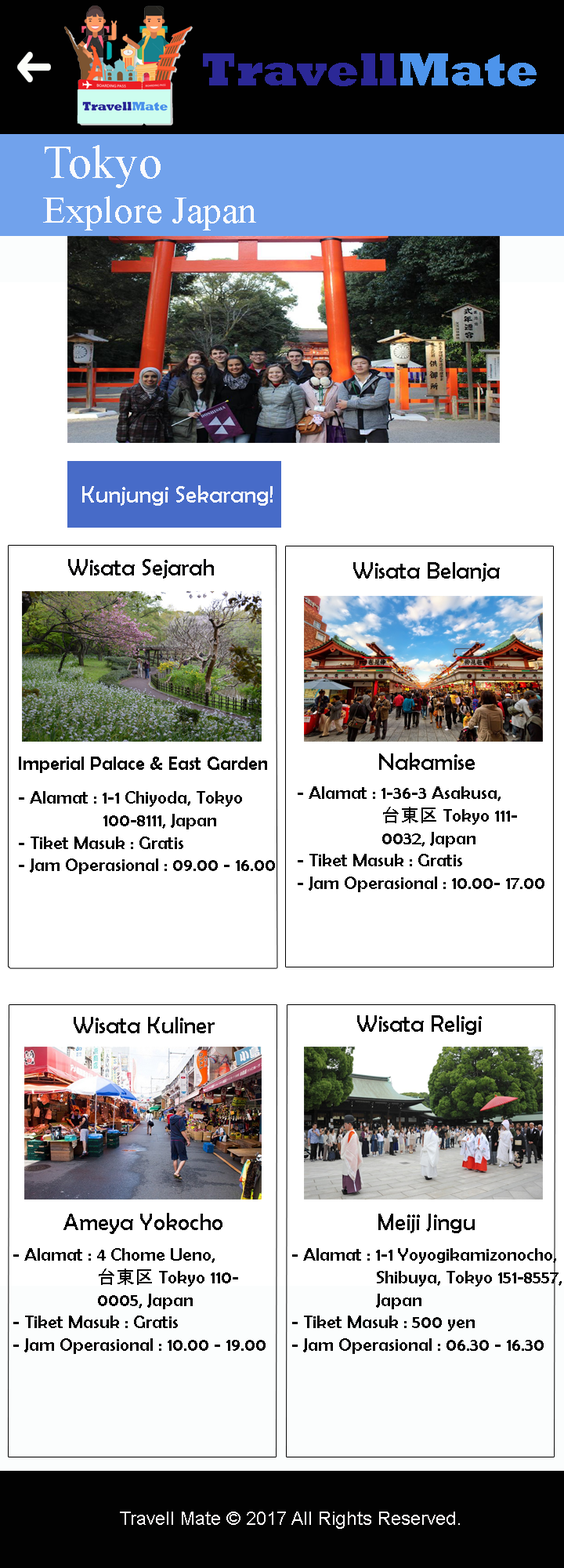
<style>
.page{position:relative;width:564px;height:1568px;background:#ffffff}
.page>*{position:absolute;margin:0}
.t1{font:47px "Rockwell-ExtraBold";color:#2b2896}
.t2{font:47px "Rockwell-ExtraBold";color:#4d94eb}
.t3{font:37.6px "TimesNewRomanPSMT";color:#fafafc}
.t4{font:47px "TimesNewRomanPSMT";color:#fafafc}
.t5{font:23.5px "BerlinSansFB-Reg";color:#fafafc}
.t6{font:23.5px "BerlinSansFB-Reg";color:#000001}
.t7{font:23.5px "BerlinSansFB-Reg";color:#020202}
.t8{font:19.6px "BerlinSansFB-Reg";color:#020202}
.t9{font:18.8px "BerlinSansFB-Reg";color:#020202}
.t10{font:18.8px "MS-Gothic";color:#020202}
.t11{font:18.8px "ArialMT";color:#fcf9f9}
</style>
<div class="page">
<p class="t1" style="left:203px;top:53px;width:334px;height:33px">Travell<span class="t2">Mate</span></p>
<p class="t3" style="left:43px;top:145px;width:213px;height:85px"><span class="t4">Tokyo<br></span>Explore Japan</p>
<p class="t5" style="left:82px;top:485px;width:191px;height:21px">Kunjungi Sekarang!</p>
<p class="t6" style="left:68px;top:559px;width:146px;height:20px">Wisata Sejarah</p>
<p class="t7" style="left:354px;top:562px;width:146px;height:20px">Wisata Belanja</p>
<p class="t8" style="left:19px;top:757px;width:248px;height:16px">Imperial Palace &amp; East Garden</p>
<p class="t7" style="left:379px;top:753px;width:96px;height:17px">Nakamise</p>
<p class="t9" style="left:19px;top:791px;width:256px;height:83px">- Alamat : 1-1 Chiyoda, Tokyo <br>   100-8111, Japan<br>- Tiket Masuk : Gratis<br>- Jam Operasional : 09.00 - 16.00</p>
<p class="t9" style="left:298px;top:786px;width:247px;height:106px">- Alamat : 1-36-3 Asakusa, <br><span class="t10">   台東区</span> Tokyo 111-<br>   0032, Japan<br>- Tiket Masuk : Gratis<br>- Jam Operasional : 10.00- 17.00</p>
<p class="t7" style="left:74px;top:1017px;width:141px;height:16px">Wisata Kuliner</p>
<p class="t7" style="left:358px;top:1015px;width:124px;height:20px">Wisata Religi</p>
<p class="t7" style="left:64px;top:1213px;width:159px;height:21px">Ameya Yokocho</p>
<p class="t7" style="left:379px;top:1214px;width:96px;height:19px">Meiji Jingu</p>
<p class="t9" style="left:13px;top:1248px;width:253px;height:106px">- Alamat : 4 Chome Ueno, <br><span class="t10">   台東区</span> Tokyo 110-<br>   0005, Japan<br>- Tiket Masuk : Gratis<br>- Jam Operasional : 10.00 - 19.00</p>
<p class="t9" style="left:292px;top:1248px;width:270px;height:106px">- Alamat : 1-1 Yoyogikamizonocho, <br>   Shibuya, Tokyo 151-8557, <br>   Japan<br>- Tiket Masuk : 500 yen<br>- Jam Operasional : 06.30 - 16.30</p>
<p class="t11" style="left:120px;top:1512px;width:340px;height:17px">Travell Mate © 2017 All Rights Reserved.</p>
</div>
